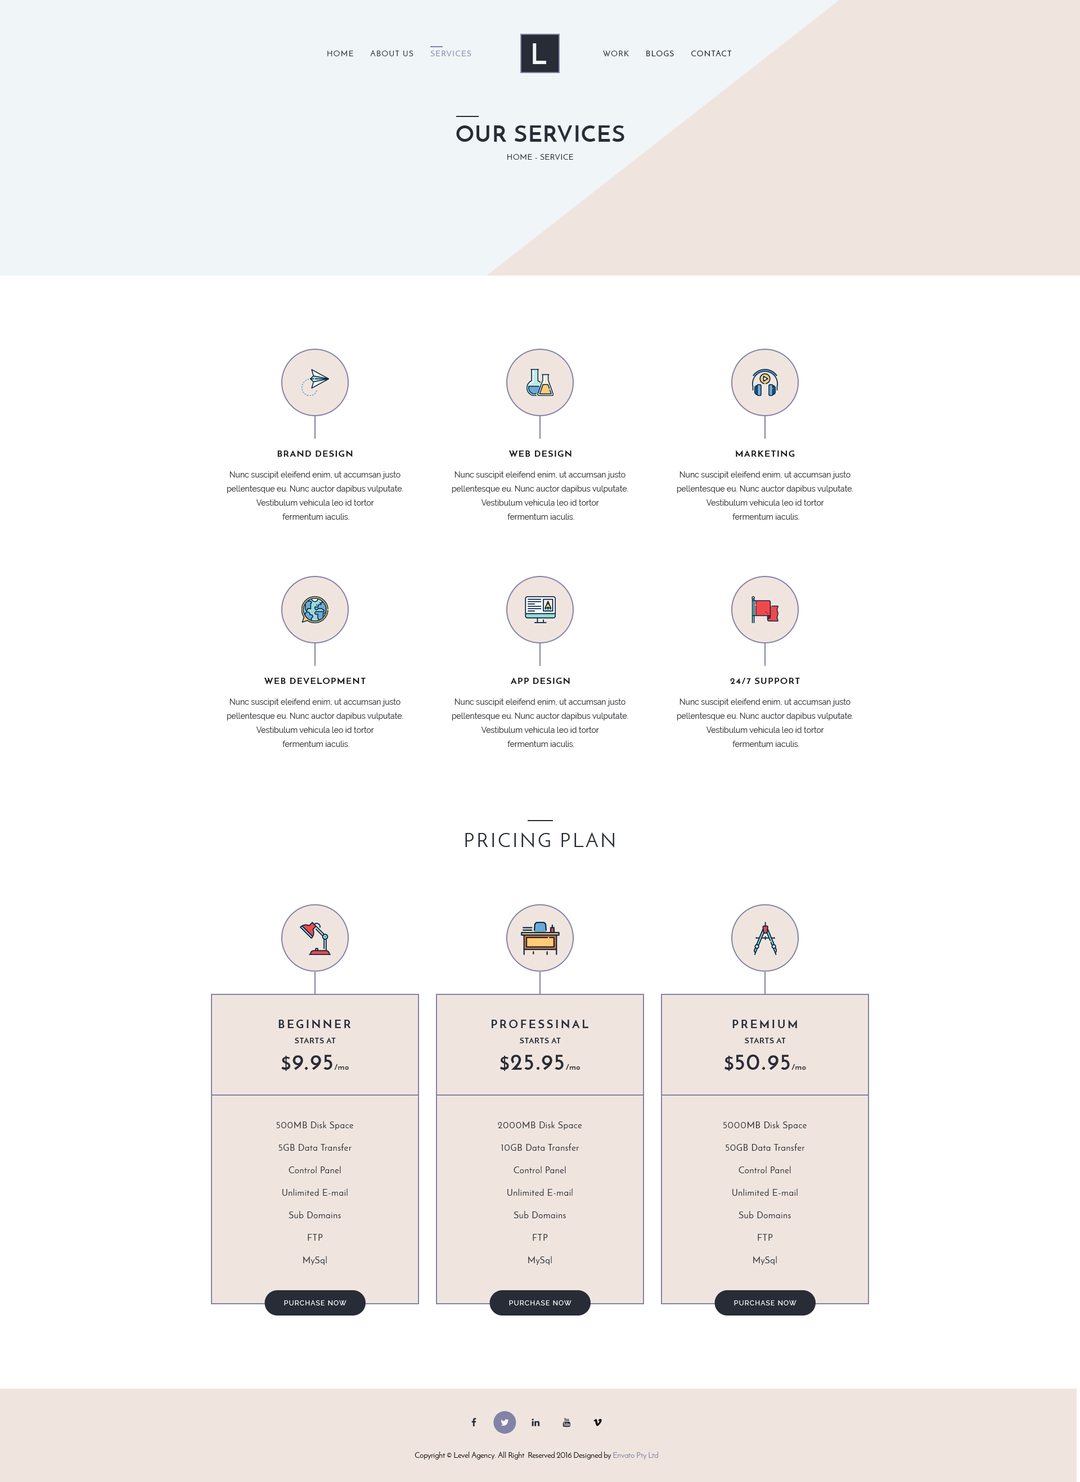
<style>
.page{position:relative;width:1080px;height:1482px;background:#ffffff}
.page>*{position:absolute;margin:0}
.t1{font:7.9px "JosefinSans";letter-spacing:0.1em;color:#282c37;text-transform:uppercase}
.t2{font:7.9px "JosefinSans";letter-spacing:0.1em;color:#8283a7;text-transform:uppercase}
.t3{font:28.1px "JosefinSans-Bold";letter-spacing:0.4em;color:#f0f5f7;text-transform:uppercase}
.t4{font:7.9px "JosefinSans";letter-spacing:0.1em;color:#141414;text-transform:uppercase}
.t5{font:22.5px "JosefinSans-Bold";letter-spacing:0.05em;color:#282c37;text-transform:uppercase}
.t6{font:7.9px "JosefinSans";letter-spacing:0.05em;color:#282c37;text-transform:uppercase}
.t7{font:9px "JosefinSans-Bold";letter-spacing:0.1em;color:#141414;text-transform:uppercase}
.t8{font:7.9px/14.1px "Raleway";color:#383a3f}
.t9{font:19.7px "JosefinSans";letter-spacing:0.1em;color:#282c37;text-transform:uppercase}
.t10{font:11.2px "JosefinSans-Bold";letter-spacing:0.2em;color:#282c37;text-transform:uppercase}
.t11{font:7.9px "JosefinSans-Bold";letter-spacing:0.05em;color:#282c37;text-transform:uppercase}
.t12{font:22.5px "JosefinSans-Bold";letter-spacing:0.05em;color:#282c37}
.t13{font:16.9px "JosefinSans-Bold";letter-spacing:0.05em;color:#282c37}
.t14{font:7.9px "JosefinSans-Bold";letter-spacing:0.05em;color:#282c37}
.t15{font:9px/22.5px "JosefinSans";letter-spacing:0.05em;color:#282c37}
.t16{font:6.8px "Raleway-Medium";letter-spacing:0.1em;color:#ffffff;text-transform:uppercase}
.t17{font:7.9px "JosefinSans";color:#141414}
.t18{font:7.9px "JosefinSans";color:#8283a7}
</style>
<div class="page">
<p class="t1" style="left:327px;top:50px;width:144px;height:7px">HOME      ABOUT US      <span class="t2">SERVICES</span></p>
<p class="t3" style="left:533px;top:43px;width:13px;height:21px">L</p>
<p class="t4" style="left:603px;top:50px;width:128px;height:7px"><span class="t1">WORK</span>      BLOGS      CONTACT</p>
<p class="t5" style="left:456px;top:125px;width:168px;height:18px">Our Services</p>
<p class="t6" style="left:507px;top:154px;width:66px;height:6px">Home - Service</p>
<p class="t7" style="left:277px;top:450px;width:76px;height:7px">Brand Design</p>
<p class="t7" style="left:509px;top:450px;width:63px;height:7px">Web Design</p>
<p class="t7" style="left:736px;top:450px;width:59px;height:7px">Marketing</p>
<p class="t8" style="left:227px;top:471px;width:176px;height:49px;text-align:center">Nunc suscipit eleifend enim, ut accumsan justo pellentesque eu. Nunc auctor dapibus vulputate. Vestibulum vehicula leo id tortor<br> fermentum iaculis.</p>
<p class="t8" style="left:452px;top:471px;width:176px;height:49px;text-align:center">Nunc suscipit eleifend enim, ut accumsan justo pellentesque eu. Nunc auctor dapibus vulputate. Vestibulum vehicula leo id tortor<br> fermentum iaculis.</p>
<p class="t8" style="left:677px;top:471px;width:176px;height:49px;text-align:center">Nunc suscipit eleifend enim, ut accumsan justo pellentesque eu. Nunc auctor dapibus vulputate. Vestibulum vehicula leo id tortor<br> fermentum iaculis.</p>
<p class="t7" style="left:264px;top:677px;width:102px;height:8px">Web DeVelopment</p>
<p class="t7" style="left:511px;top:677px;width:59px;height:8px">App Design</p>
<p class="t7" style="left:730px;top:678px;width:70px;height:6px">24/7 Support</p>
<p class="t8" style="left:227px;top:699px;width:176px;height:48px;text-align:center">Nunc suscipit eleifend enim, ut accumsan justo pellentesque eu. Nunc auctor dapibus vulputate. Vestibulum vehicula leo id tortor<br> fermentum iaculis.</p>
<p class="t8" style="left:452px;top:699px;width:176px;height:48px;text-align:center">Nunc suscipit eleifend enim, ut accumsan justo pellentesque eu. Nunc auctor dapibus vulputate. Vestibulum vehicula leo id tortor<br> fermentum iaculis.</p>
<p class="t8" style="left:677px;top:699px;width:176px;height:48px;text-align:center">Nunc suscipit eleifend enim, ut accumsan justo pellentesque eu. Nunc auctor dapibus vulputate. Vestibulum vehicula leo id tortor<br> fermentum iaculis.</p>
<p class="t9" style="left:465px;top:832px;width:149px;height:16px">Pricing Plan</p>
<p class="t10" style="left:278px;top:1019px;width:73px;height:10px">Beginner</p>
<p class="t10" style="left:492px;top:1019px;width:96px;height:10px">Professinal</p>
<p class="t10" style="left:732px;top:1020px;width:65px;height:8px">Premium</p>
<p class="t11" style="left:295px;top:1037px;width:41px;height:6px">Starts at</p>
<p class="t11" style="left:520px;top:1037px;width:41px;height:6px">Starts at</p>
<p class="t11" style="left:745px;top:1037px;width:41px;height:6px">Starts at</p>
<p class="t12" style="left:281px;top:1055px;width:68px;height:16px"><span class="t13">$</span>9.95<span class="t14">/mo</span></p>
<p class="t12" style="left:500px;top:1055px;width:80px;height:16px"><span class="t13">$</span>25.95<span class="t14">/mo</span></p>
<p class="t12" style="left:724px;top:1055px;width:82px;height:16px"><span class="t13">$</span>50.95<span class="t14">/mo</span></p>
<p class="t15" style="left:276px;top:1121px;width:78px;height:144px;text-align:center">500MB Disk Space<br>5GB Data Transfer<br>Control Panel<br>Unlimited E-mail<br>Sub Domains<br>FTP<br>MySql</p>
<p class="t15" style="left:498px;top:1121px;width:84px;height:144px;text-align:center">2000MB Disk Space<br>10GB Data Transfer<br>Control Panel<br>Unlimited E-mail<br>Sub Domains<br>FTP<br>MySql</p>
<p class="t15" style="left:723px;top:1121px;width:84px;height:144px;text-align:center">5000MB Disk Space<br>50GB Data Transfer<br>Control Panel<br>Unlimited E-mail<br>Sub Domains<br>FTP<br>MySql</p>
<p class="t16" style="left:284px;top:1300px;width:62px;height:6px">Purchase Now</p>
<p class="t16" style="left:509px;top:1300px;width:63px;height:6px">Purchase Now</p>
<p class="t16" style="left:734px;top:1300px;width:62px;height:6px">Purchase Now</p>
<p class="t17" style="left:415px;top:1452px;width:243px;height:8px">Copyright © Level Agency. All Right  Reserved 2016 Designed by <span class="t18">Envato Pty Ltd</span></p>
</div>
